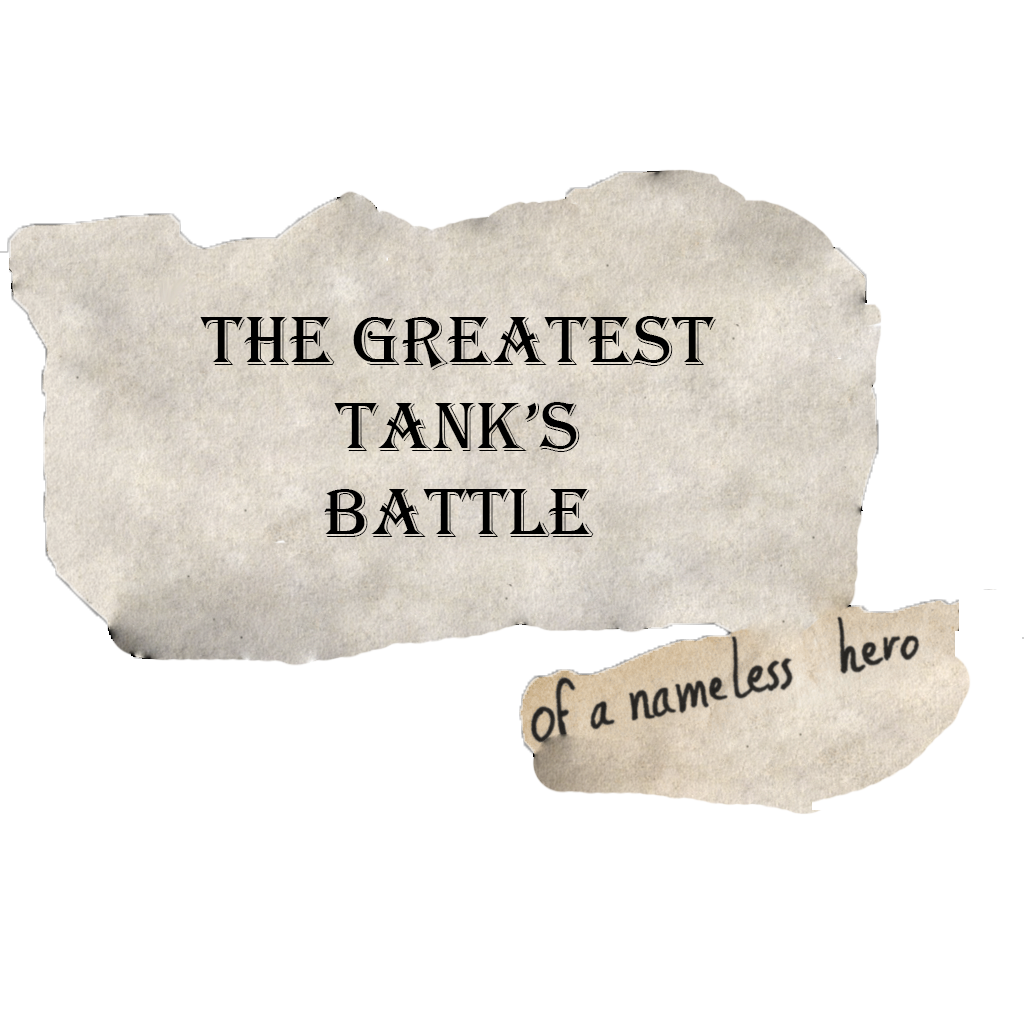
<style>
.page{position:relative;width:1024px;height:1024px;background:#ffffff}
.page>*{position:absolute;margin:0}
.t1{font:72px "Algerian";color:#000000}
</style>
<div class="page">
<p class="t1" style="left:200px;top:316px;width:516px;height:221px;text-align:center">The greatest tank’s <br>Battle</p>
</div>
